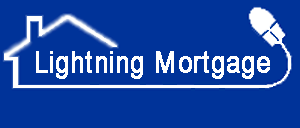
<style>
.page{position:relative;width:300px;height:128px;background:#003399}
.page>*{position:absolute;margin:0}
.t1{font:30.1px "ArialNarrow";color:#ffffff;font-weight:bold}
</style>
<div class="page">
<p class="t1" style="left:36px;top:51px;width:234px;height:28px">Lightning Mortgage</p>
</div>
